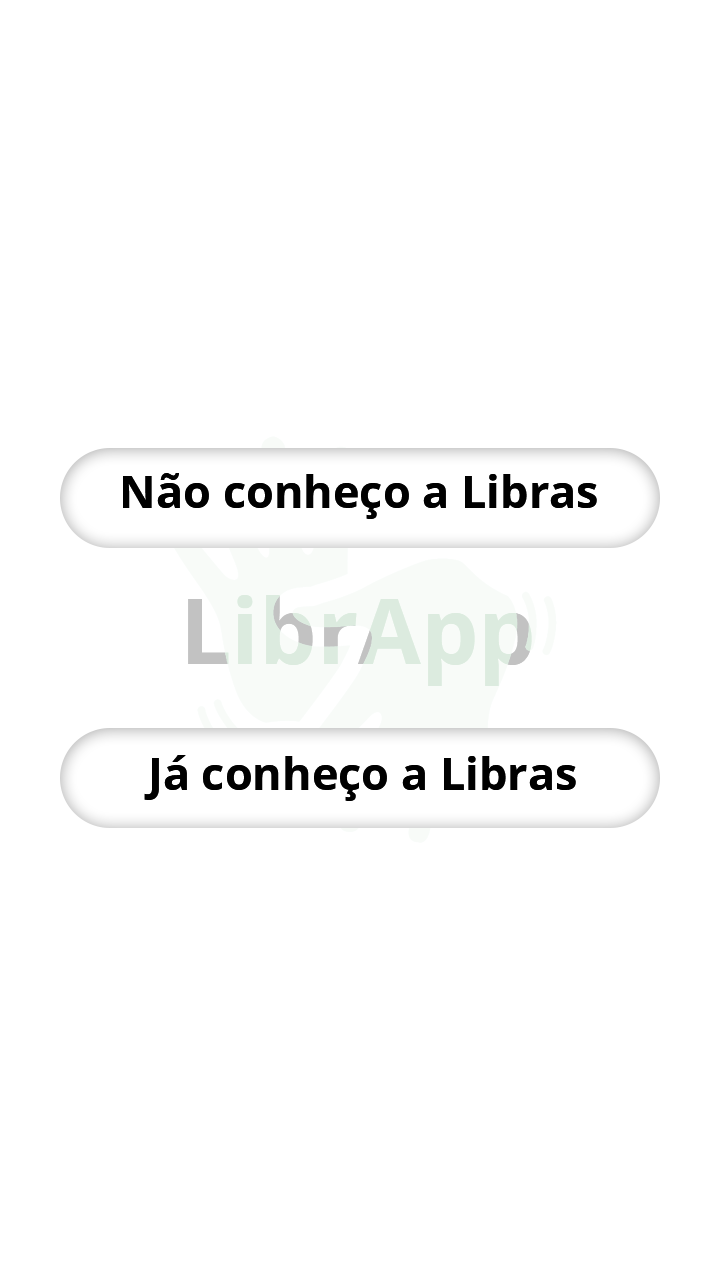
<style>
.page{position:relative;width:720px;height:1280px;background:#ffffff}
.page>*{position:absolute;margin:0}
.t1{font:45px "OpenSans-Bold";color:#000000}
</style>
<div class="page">
<p class="t1" style="left:123px;top:473px;width:474px;height:46px">Não conheço a Libras</p>
<p class="t1" style="left:144px;top:755px;width:432px;height:46px">Já conheço a Libras</p>
</div>
